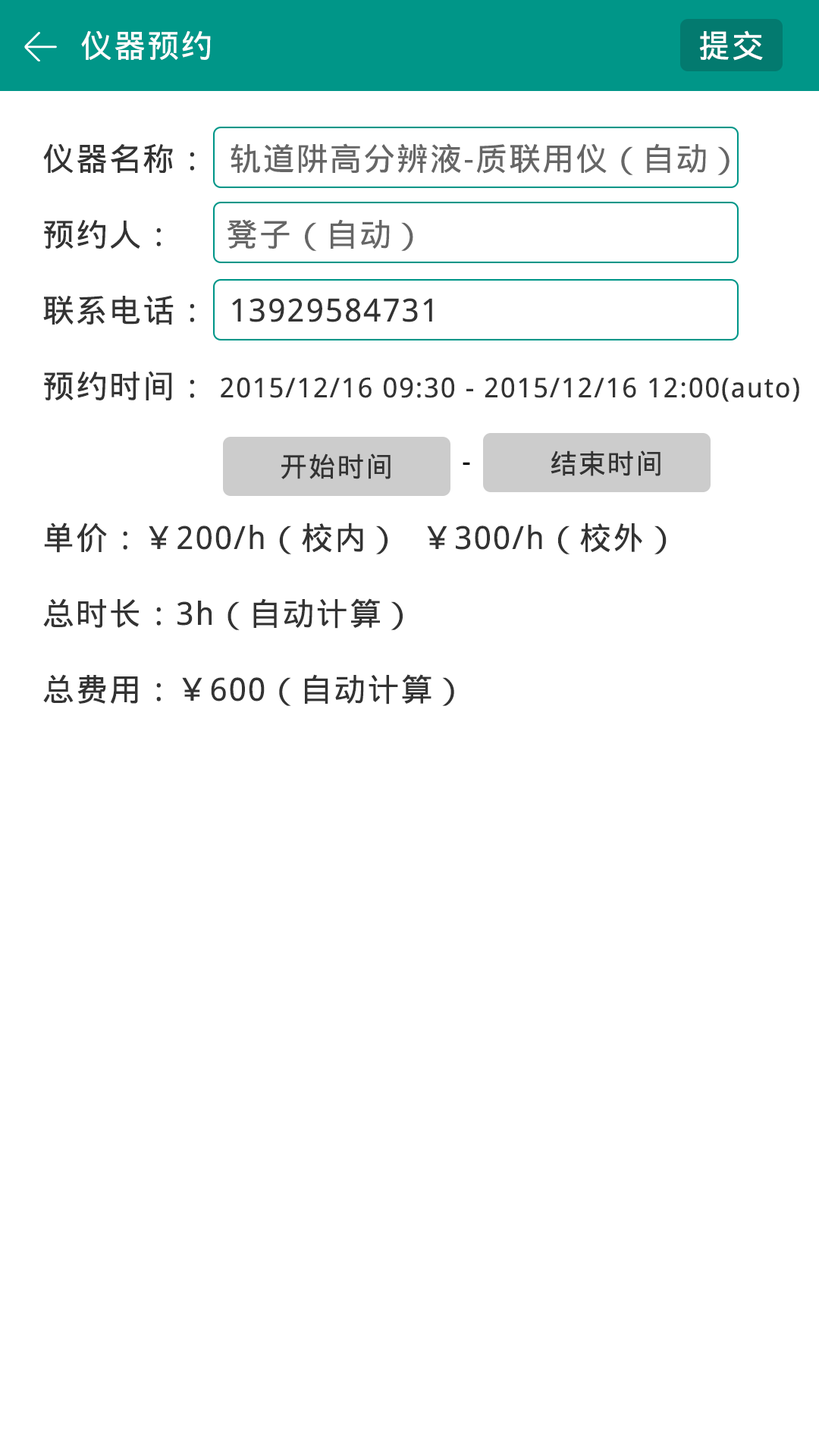
<style>
.page{position:relative;width:819px;height:1456px;background:#ffffff}
.page>*{position:absolute;margin:0}
.t1{font:31.8px "DroidSansFallback";letter-spacing:0.05em;color:#ffffff}
.t2{font:31.8px/75.8px "DroidSansFallback";letter-spacing:0.05em;color:#333333}
.t3{font:31.8px/75.8px "DroidSansFallback";letter-spacing:0.05em;color:#666666}
.t4{font:27.3px/75.8px "DroidSansFallback";letter-spacing:0.05em;color:#333333}
.t5{font:27.3px "DroidSansFallback";letter-spacing:0.05em;color:#333333}
.t6{font:27.3px "DroidSansFallback";letter-spacing:0.05em;color:#000000}
</style>
<div class="page">
<p class="t1" style="left:81px;top:31px;width:130px;height:29px">仪器预约</p>
<p class="t1" style="left:699px;top:30px;width:64px;height:31px">提交</p>
<p class="t2" style="left:43px;top:143px;width:756px;height:563px">仪器名称：  <span class="t3">轨道阱高分辨液-质联用仪（自动）<br></span>预约人：     <span class="t3">凳子（自动）<br></span>联系电话：  13929584731<br>预约时间： <span class="t4">2015/12/16 09:30 - 2015/12/16 12:00(auto)<br>       <br></span>单价：￥200/h（校内）  ￥300/h（校外）<br>总时长：3h（自动计算）<br>总费用：￥600（自动计算）</p>
<p class="t5" style="left:281px;top:453px;width:110px;height:26px">开始时间</p>
<p class="t6" style="left:463px;top:462px;width:7px;height:3px">-</p>
<p class="t5" style="left:551px;top:450px;width:109px;height:26px">结束时间</p>
</div>
